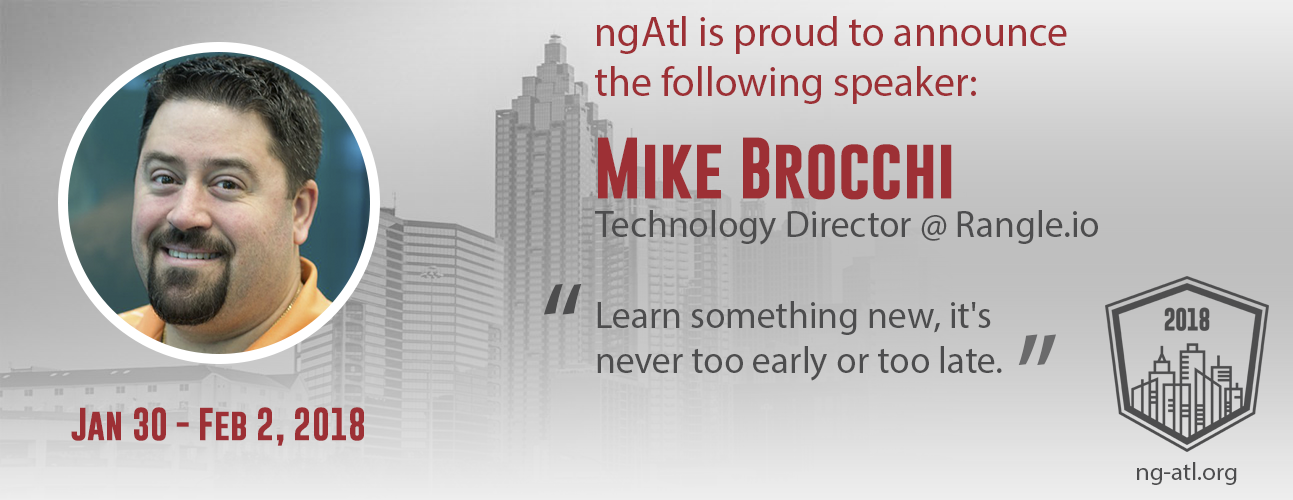
<style>
.page{position:relative;width:1293px;height:500px}
.page>*{position:absolute;margin:0}
.t1{font:41.7px "MyriadPro-Regular";color:#9d3035}
.t2{font:62.5px "GoboldBold";color:#9d3035}
.t3{font:37.5px "MyriadPro-Regular";color:#4d4d4e}
.t4{font:125px "MyriadPro-Regular";color:#4d4d4e}
.t5{font:125px "MyriadPro-Regular";color:#6a6a6b}
.t6{font:33.3px "GoboldBold";color:#9d3035}
.t7{font:25px "MyriadPro-Regular";color:#4d4d4e}
</style>
<div class="page">
<p class="t1" style="left:595px;top:16px;width:472px;height:88px">ngAtl is proud to announce the following speaker:</p>
<p class="t2" style="left:598px;top:137px;width:354px;height:63px">Mike Brocchi</p>
<p class="t3" style="left:595px;top:210px;width:503px;height:35px">Technology Director @ Rangle.io</p>
<p class="t4" style="left:544px;top:283px;width:38px;height:32px">“</p>
<p class="t3" style="left:597px;top:301px;width:405px;height:80px">Learn something new, it's never too early or too late.</p>
<p class="t5" style="left:1018px;top:334px;width:38px;height:32px;rotate:180deg">“</p>
<p class="t6" style="left:71px;top:407px;width:293px;height:39px">Jan 30 - Feb 2, 2018</p>
<p class="t7" style="left:1137px;top:462px;width:100px;height:23px">ng-atl.org</p>
</div>
